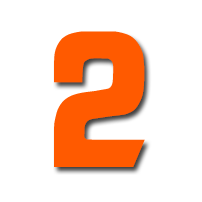
<style>
.page{position:relative;width:202px;height:202px;background:#ffffff}
.page>*{position:absolute;margin:0}
.t1{font:200px "HYk2gj";letter-spacing:0.025em;color:#ff5a00}
</style>
<div class="page">
<p class="t1" style="left:54px;top:31px;width:91px;height:136px">2</p>
</div>
